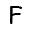
<style>
.page{position:relative;width:32px;height:32px;background:#ffffff}
.page>*{position:absolute;margin:0}
.t1{font:24px "ComicSansMS";color:#000000}
</style>
<div class="page">
<p class="t1" style="left:10px;top:6px;width:13px;height:18px">F</p>
</div>
